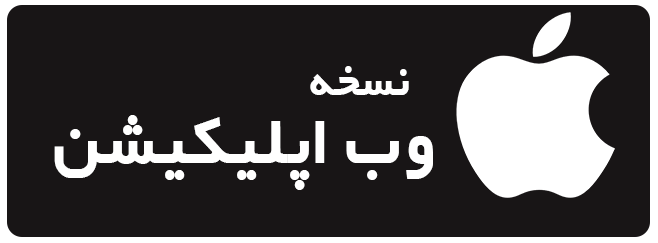
<style>
.page{position:relative;width:658px;height:243px;background:#181516}
.page>*{position:absolute;margin:0}
.t1{font:37.5px "IRYekan-Bold";color:#ffffff}
.t2{font:58.3px "IRYekan-Bold";color:#ffffff}
</style>
<div class="page">
<p class="t1" style="left:310px;top:66px;width:99px;height:29px">نسخه</p>
<p class="t2" style="left:54px;top:115px;width:379px;height:75px">وب اپلیکیشن</p>
</div>
